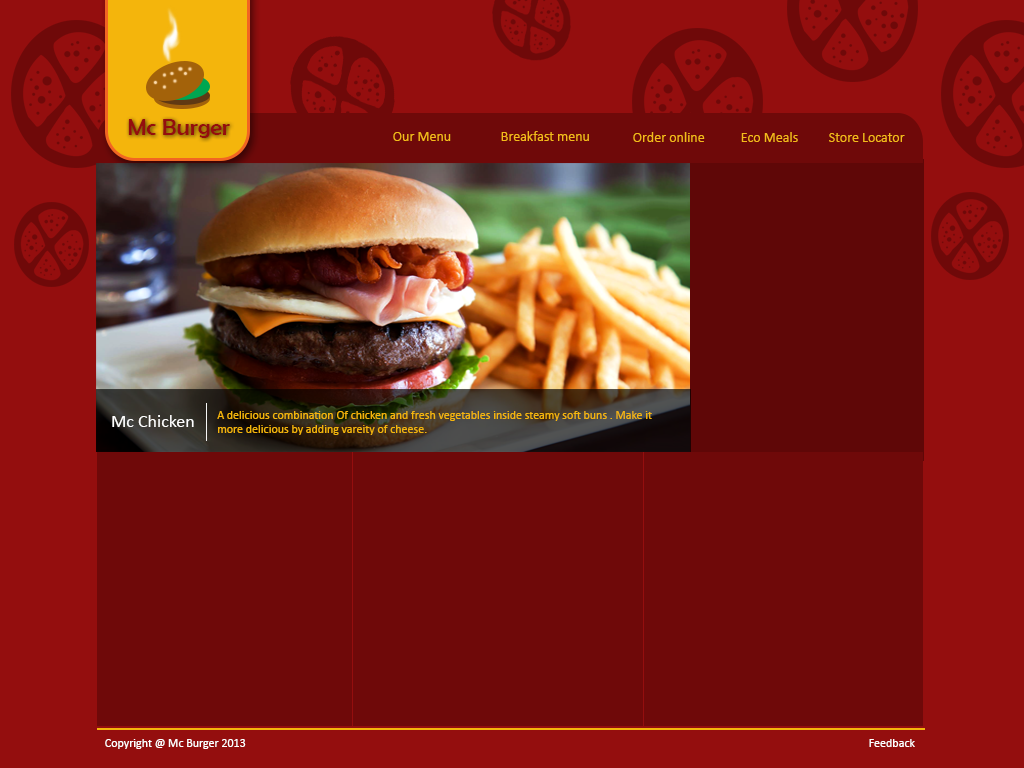
<style>
.page{position:relative;width:1024px;height:768px;background:#6f0909}
.page>*{position:absolute;margin:0}
.t1{font:24px "BerlinSansFB-Reg";color:#940e0e}
.t2{font:14px "Calibri";color:#f5ba1b}
.t3{font:12px "Calibri";color:#f4b50c}
.t4{font:18px "Calibri";color:#ffffff}
.t5{font:12px "Calibri";color:#ffffff}
</style>
<div class="page">
<p class="t1" style="left:128px;top:119px;width:102px;height:19px">Mc Burger</p>
<p class="t2" style="left:393px;top:132px;width:58px;height:9px">Our Menu</p>
<p class="t2" style="left:501px;top:131px;width:88px;height:10px">Breakfast menu</p>
<p class="t2" style="left:633px;top:132px;width:72px;height:10px">Order online</p>
<p class="t2" style="left:741px;top:132px;width:57px;height:10px">Eco Meals</p>
<p class="t2" style="left:829px;top:133px;width:76px;height:9px">Store Locator</p>
<p class="t3" style="left:217px;top:411px;width:435px;height:24px">A delicious combination Of chicken and fresh vegetables inside steamy soft buns . Make it more delicious by adding vareity of cheese.</p>
<p class="t4" style="left:112px;top:415px;width:82px;height:12px">Mc Chicken</p>
<p class="t5" style="left:105px;top:739px;width:141px;height:10px">Copyright @ Mc Burger 2013</p>
<p class="t5" style="left:869px;top:739px;width:46px;height:8px">Feedback</p>
</div>
